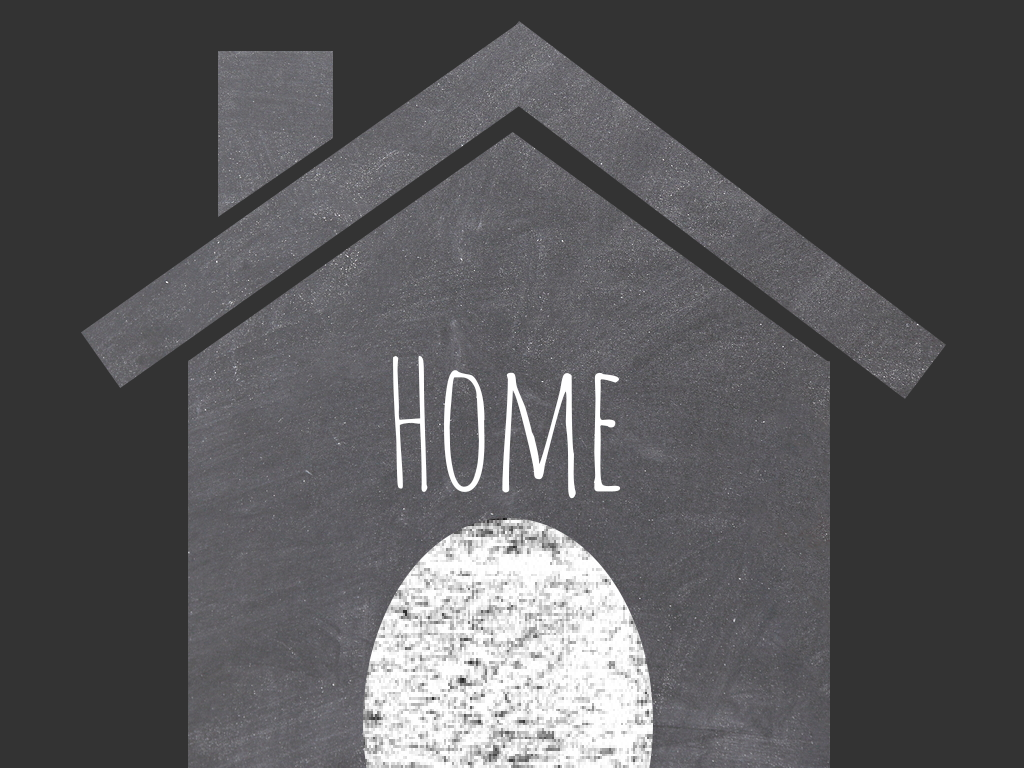
<style>
.page{position:relative;width:1024px;height:768px;background:#333333}
.page>*{position:absolute;margin:0}
.t1{font:176px "AmaticSC-Regular";color:#ffffff}
</style>
<div class="page">
<p class="t1" style="left:393px;top:355px;width:228px;height:144px">Home</p>
</div>
